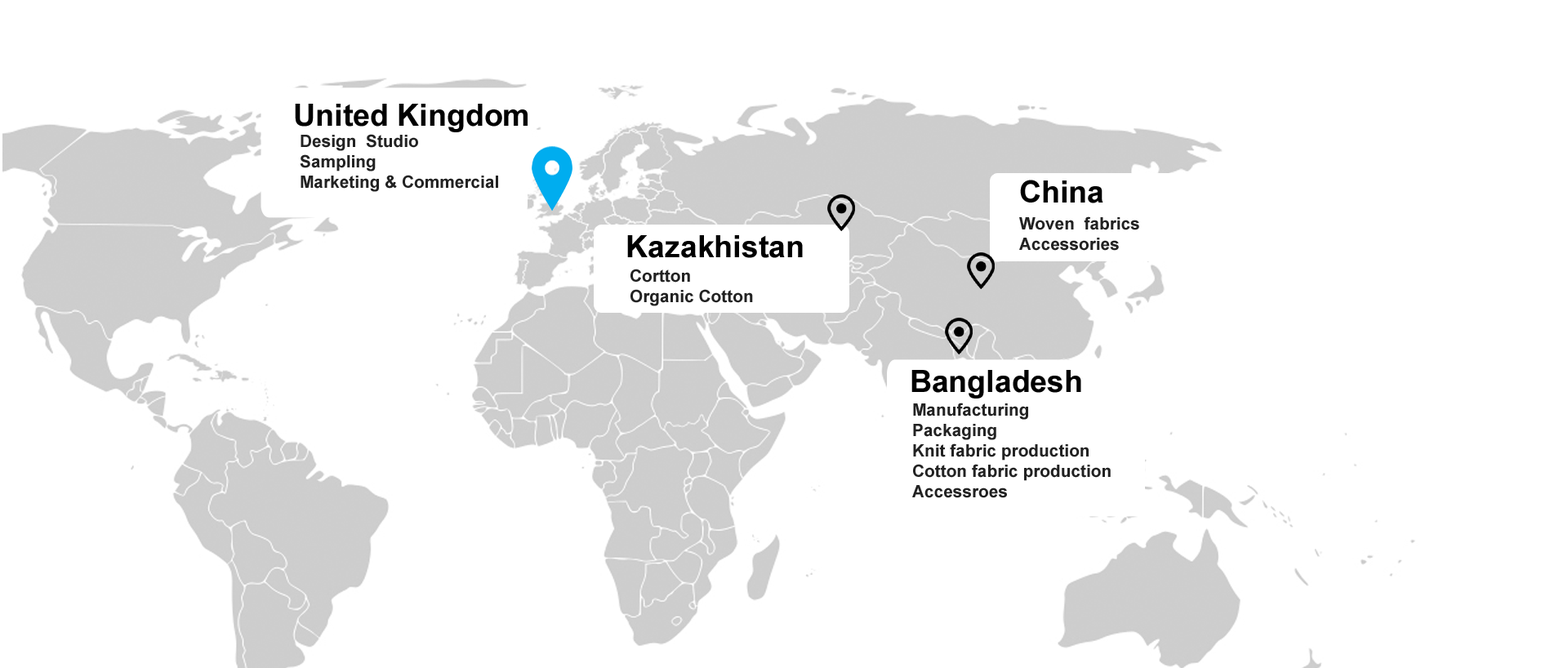
<style>
.page{position:relative;width:1568px;height:668px;background:#ffffff}
.page>*{position:absolute;margin:0}
.t1{font:30.6px "Arial-BoldMT";color:#000000}
.t2{font:17px "Arial-BoldMT";color:#222222}
</style>
<div class="page">
<p class="t1" style="left:295px;top:104px;width:233px;height:28px">United Kingdom</p>
<p class="t2" style="left:300px;top:134px;width:198px;height:58px">Design  Studio<br>Sampling<br>Marketing &amp; Commercial</p>
<p class="t1" style="left:1020px;top:180px;width:83px;height:23px">China</p>
<p class="t2" style="left:1019px;top:216px;width:120px;height:35px">Woven  fabrics<br>Accessories</p>
<p class="t1" style="left:627px;top:235px;width:176px;height:23px">Kazakhistan</p>
<p class="t2" style="left:630px;top:269px;width:123px;height:37px">Cortton <br>Organic Cotton</p>
<p class="t1" style="left:911px;top:370px;width:170px;height:29px">Bangladesh</p>
<p class="t2" style="left:912px;top:403px;width:199px;height:95px">Manufacturing<br>Packaging<br>Knit fabric production<br>Cotton fabric production <br>Accessroes</p>
</div>
